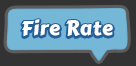
<style>
.page{position:relative;width:136px;height:66px;background:#74b7d7}
.page>*{position:absolute;margin:0}
.t1{font:20px "CarterOne";letter-spacing:0.025em;color:#ffffff}
</style>
<div class="page">
<p class="t1" style="left:22px;top:19px;width:91px;height:17px">Fire Rate</p>
</div>
